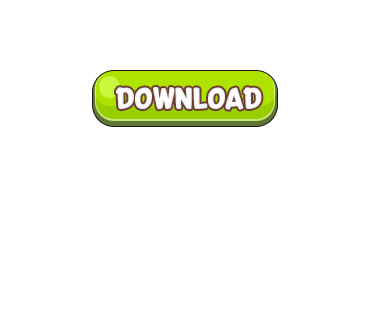
<style>
.page{position:relative;width:370px;height:329px;background:#ffffff}
.page>*{position:absolute;margin:0}
.t1{font:30px "BanzaiBrosW01-Regular";color:#fafafa}
</style>
<div class="page">
<p class="t1" style="left:116px;top:87px;width:146px;height:23px">DOWNLOAD</p>
</div>
